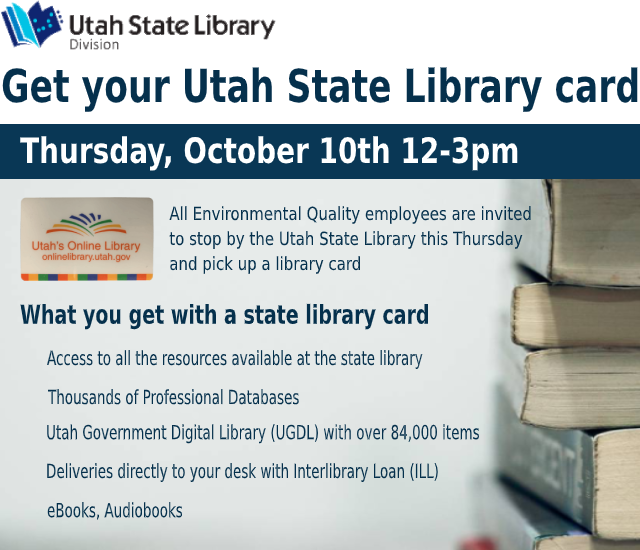
<style>
.page{position:relative;width:640px;height:550px}
.page>*{position:absolute;margin:0}
.t1{font:45.5px "DejaVuSansCondensed-Bold";color:#05304c;scale:0.85 1}
.t2{font:35.1px "DejaVuSansCondensed-Bold";color:#ffffff;scale:0.88 1}
.t3{font:18px/25px "DejaVuSans";color:#05304c;scale:0.83 1}
.t4{font:26px "DejaVuSans-Bold";color:#05304c;scale:0.73 1}
.t5{font:19.5px "DejaVuSansCondensed";color:#05304c;scale:0.77 1}
</style>
<div class="page">
<p class="t1" style="left:2px;top:67px;width:636px;height:45px">Get your Utah State Library card</p>
<p class="t2" style="left:20px;top:136px;width:498px;height:35px">Thursday, October 10th 12-3pm</p>
<p class="t3" style="left:169px;top:206px;width:362px;height:68px">All Environmental Quality employees are invited<br>to stop by the Utah State Library this Thursday<br>and pick up a library card</p>
<p class="t4" style="left:20px;top:303px;width:408px;height:27px">What you get with a state library card</p>
<p class="t5" style="left:47px;top:350px;width:376px;height:20px">Access to all the resources available at the state library</p>
<p class="t5" style="left:47px;top:389px;width:252px;height:16px">Thousands of Professional Databases</p>
<p class="t5" style="left:47px;top:424px;width:432px;height:20px">Utah Government Digital Library (UGDL) with over 84,000 items</p>
<p class="t5" style="left:47px;top:463px;width:391px;height:20px">Deliveries directly to your desk with Interlibrary Loan (ILL)</p>
<p class="t5" style="left:47px;top:502px;width:136px;height:18px">eBooks, Audiobooks</p>
</div>
